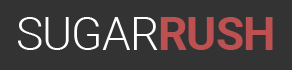
<style>
.page{position:relative;width:292px;height:70px;background:#333333}
.page>*{position:absolute;margin:0}
.t1{font:46px "Roboto-Light";letter-spacing:-0.02em;color:#ffffff;text-transform:uppercase}
.t2{font:46px "Roboto-Bold";letter-spacing:-0.02em;color:#bd5151;text-transform:uppercase}
</style>
<div class="page">
<p class="t1" style="left:18px;top:17px;width:255px;height:33px">Sugar<span class="t2">rush</span></p>
</div>
